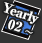
<style>
.page{position:relative;width:42px;height:43px;background:#333333}
.page>*{position:absolute;margin:0}
.t1{font:13px/14px "RyuminPro-ExBold";letter-spacing:-0.08em;color:#ffffff;font-weight:bold}
.t2{font:13px/14px "RyuminPro-ExBold";color:#ffffff;font-weight:bold}
.t3{font:13px/14px "TimesNewRomanPSMT";color:#ffffff;font-weight:bold}
</style>
<div class="page">
<p class="t1" style="left:3px;top:2px;width:36px;height:32px;text-align:center;rotate:19deg">Yearly<br><span class="t2">  02 </span><span class="t3">~</span></p>
</div>
